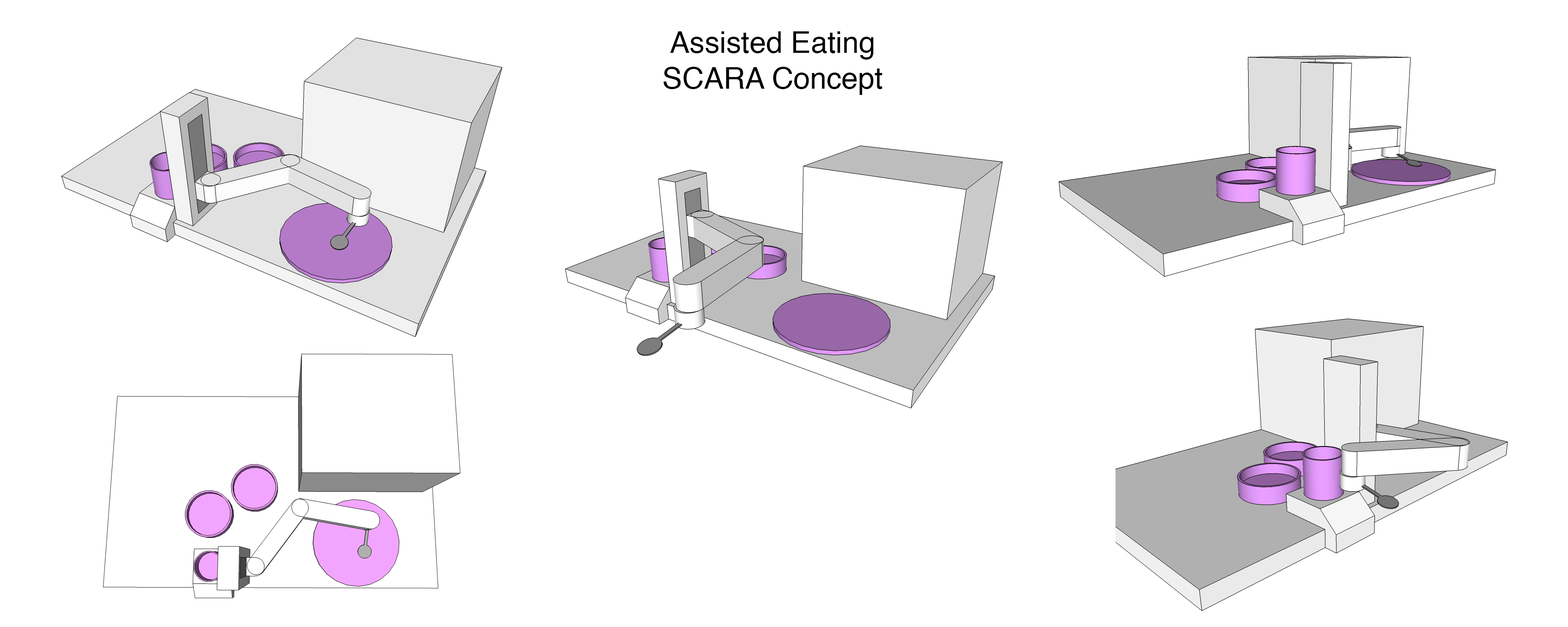
<style>
.page{position:relative;width:1568px;height:627px;background:#ffffff}
.page>*{position:absolute;margin:0}
.t1{font:29.9px "Helvetica";color:#000000}
</style>
<div class="page">
<p class="t1" style="left:663px;top:31px;width:219px;height:64px;text-align:center">Assisted Eating<br>SCARA Concept</p>
</div>
